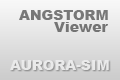
<style>
.page{position:relative;width:120px;height:80px}
.page>*{position:absolute;margin:0}
.t1{font:14px "Arial-Black";color:#787878}
.t2{font:14px "Arial-Black";color:#747474}
.t3{font:14px "Arial-Black";color:#e9e9e9}
</style>
<div class="page">
<p class="t1" style="left:19px;top:10px;width:89px;height:10px">ANGSTORM</p>
<p class="t2" style="left:54px;top:22px;width:54px;height:10px">Viewer</p>
<p class="t3" style="left:10px;top:60px;width:99px;height:10px">AURORA-SIM</p>
</div>
